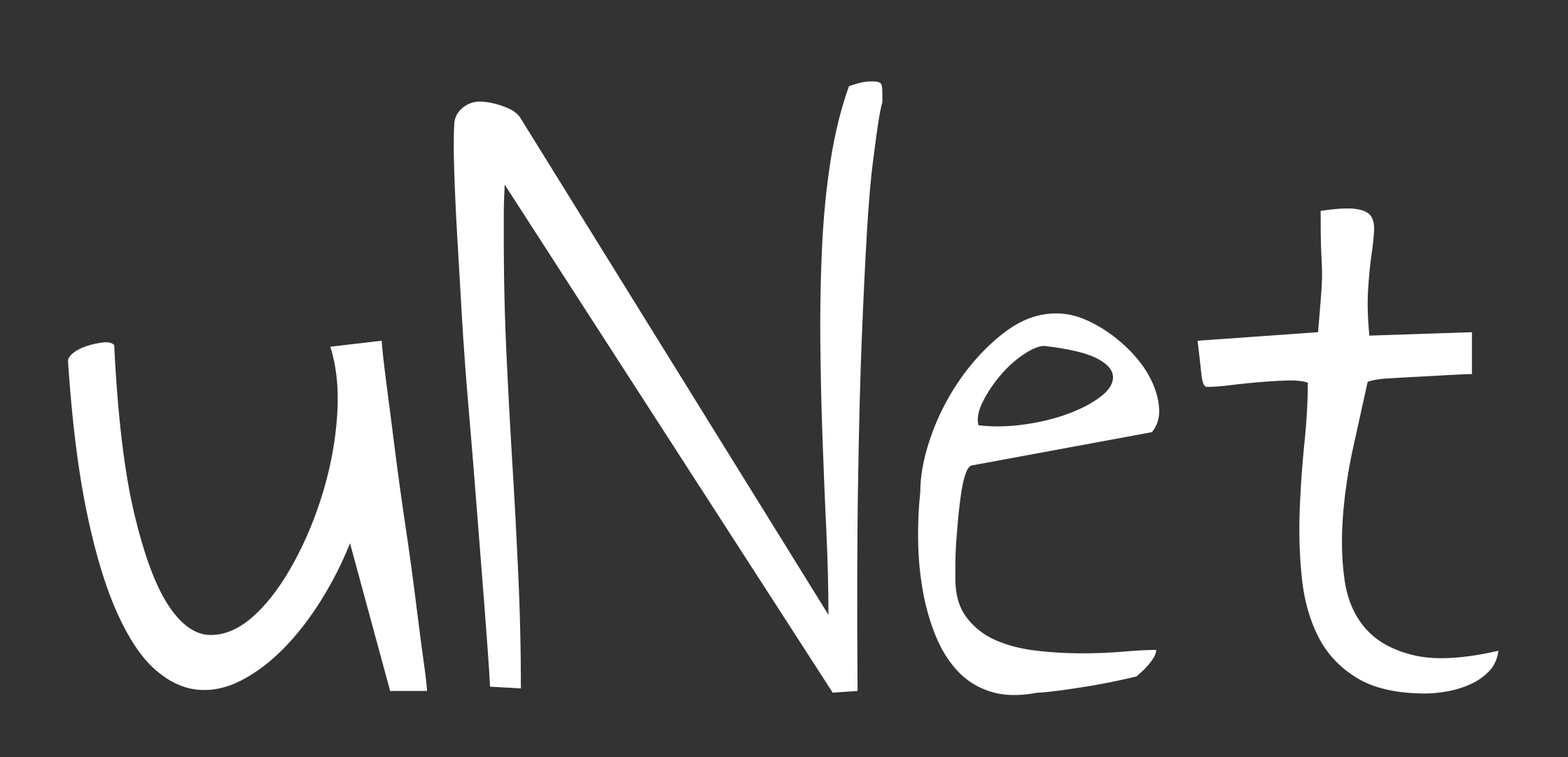
<style>
.page{position:relative;width:1568px;height:757px;background:#333333}
.page>*{position:absolute;margin:0}
.t1{font:875px "AnnieUseYourTelescope-Regular";color:#ffffff}
</style>
<div class="page">
<p class="t1" style="left:68px;top:81px;width:1431px;height:615px">uNet</p>
</div>
